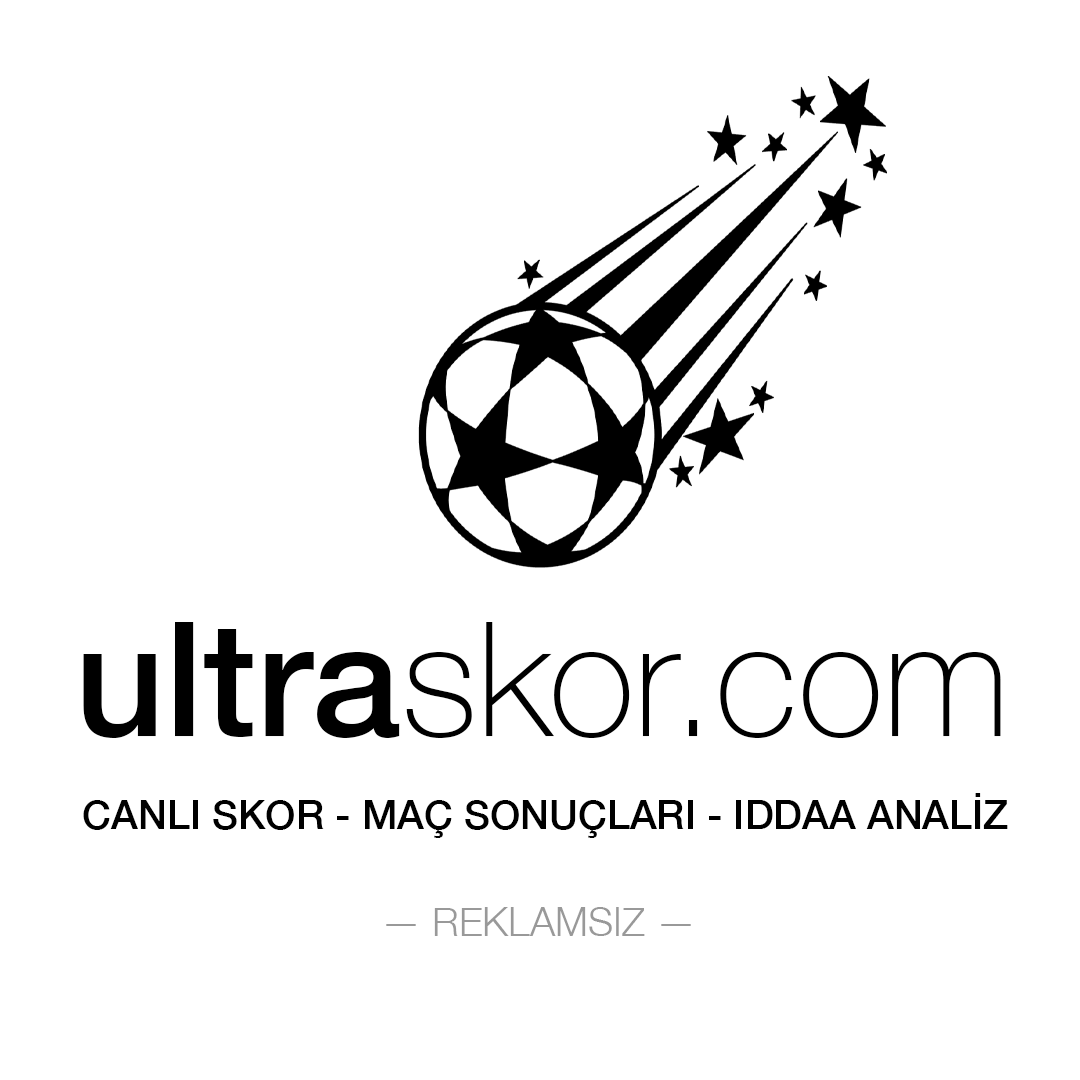
<style>
.page{position:relative;width:1080px;height:1080px;background:#ffffff}
.page>*{position:absolute;margin:0}
.t1{font:159px "HelveticaNeue-Thin";color:#000000}
.t2{font:159px "HelveticaNeue-Medium";color:#000000}
.t3{font:40px "HelveticaNeue-Medium";color:#000000}
.t4{font:40px "HelveticaNeue-Light";color:#999999}
</style>
<div class="page">
<p class="t1" style="left:83px;top:622px;width:918px;height:116px"><span class="t2">ultra</span>skor.com</p>
<p class="t3" style="left:83px;top:793px;width:925px;height:45px">CANLI SKOR - MAÇ SONUÇLARI - IDDAA ANALİZ</p>
<p class="t4" style="left:386px;top:907px;width:305px;height:29px">— REKLAMSIZ —</p>
</div>
